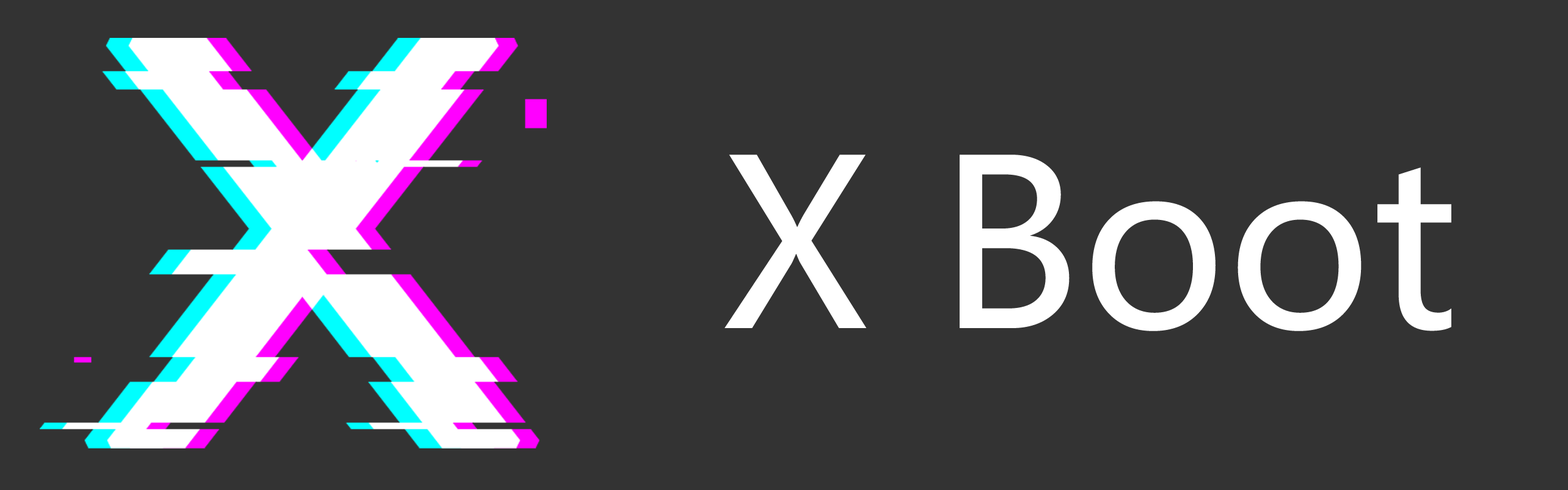
<style>
.page{position:relative;width:1568px;height:490px;background:#333333}
.page>*{position:absolute;margin:0}
.t1{font:229.1px "MicrosoftYaHeiUI";color:#ffffff}
</style>
<div class="page">
<p class="t1" style="left:724px;top:155px;width:727px;height:176px">X Boot</p>
</div>
